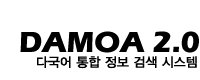
<style>
.page{position:relative;width:200px;height:80px;background:#ffffff}
.page>*{position:absolute;margin:0}
.t1{font:30px "ErasITC-Bold";color:#000000}
.t2{font:13px "YDIYGO130";color:#000000}
</style>
<div class="page">
<p class="t1" style="left:20px;top:31px;width:179px;height:22px">DAMOA 2.0</p>
<p class="t2" style="left:37px;top:56px;width:160px;height:13px">다국어 통합 정보 검색 시스템</p>
</div>
